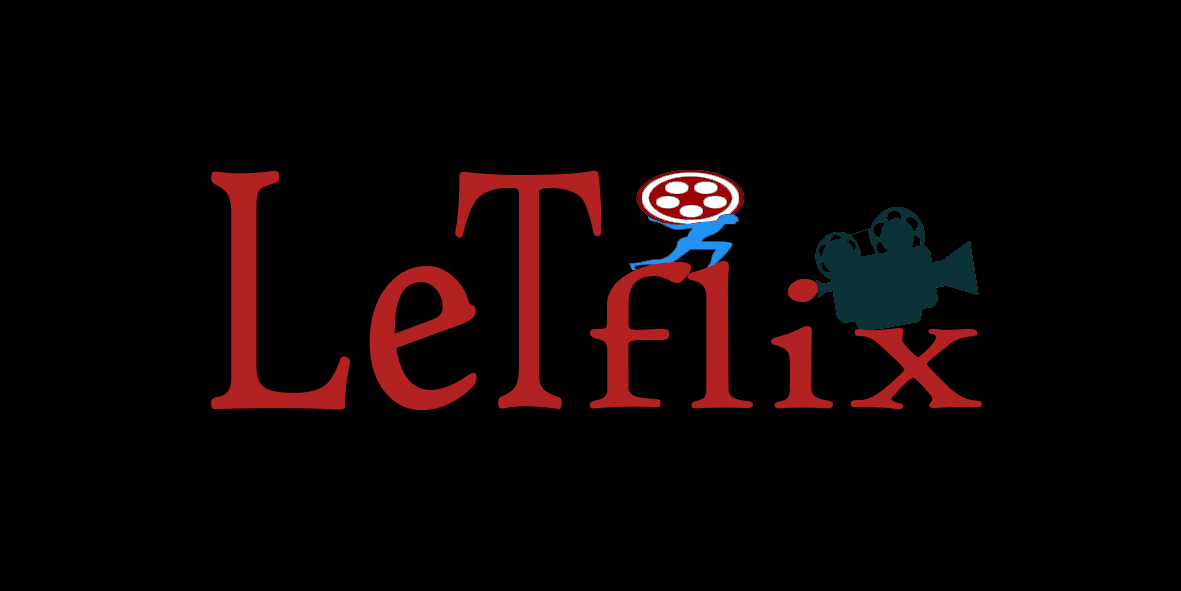
<style>
.page{position:relative;width:1181px;height:591px;background:#000000}
.page>*{position:absolute;margin:0}
.t1{font:364.6px "HighTowerText-Reg";color:#b22222;scale:0.8 1}
.t2{font:208.7px "HighTowerText-Reg";color:#b22222;scale:1.35 1}
</style>
<div class="page">
<p class="t1" style="left:211px;top:170px;width:266px;height:240px">Le</p>
<p class="t2" style="left:589px;top:261px;width:393px;height:149px">flix</p>
</div>
